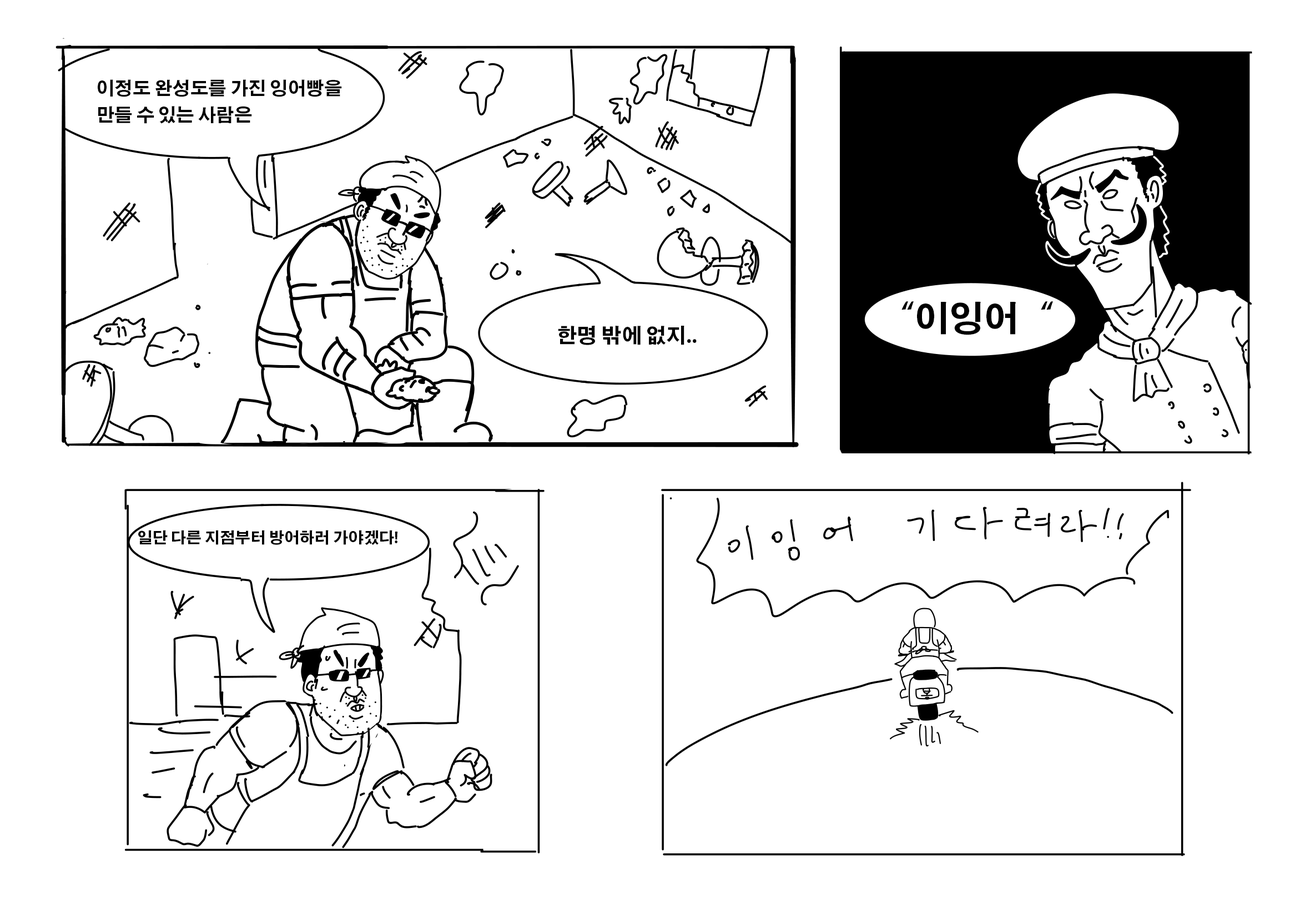
<style>
.page{position:relative;width:1310px;height:910px;background:#ffffff}
.page>*{position:absolute;margin:0}
.t1{font:18px "AdobeGothicStd-Bold";color:#000000}
.t2{font:34.8px "AdobeGothicStd-Bold";color:#000000}
.t3{font:20.1px "AdobeGothicStd-Bold";color:#000000}
.t4{font:15.2px "AdobeGothicStd-Bold";color:#000000}
</style>
<div class="page">
<p class="t1" style="left:98px;top:79px;width:244px;height:45px">이정도 완성도를 가진 잉어빵을 <br>만들 수 있는 사람은</p>
<p class="t2" style="left:901px;top:301px;width:152px;height:34px">“이잉어“</p>
<p class="t3" style="left:558px;top:326px;width:139px;height:19px">한명 밖에 없지..</p>
<p class="t4" style="left:138px;top:530px;width:259px;height:15px">일단 다른 지점부터 방어하러 가야겠다!</p>
</div>
